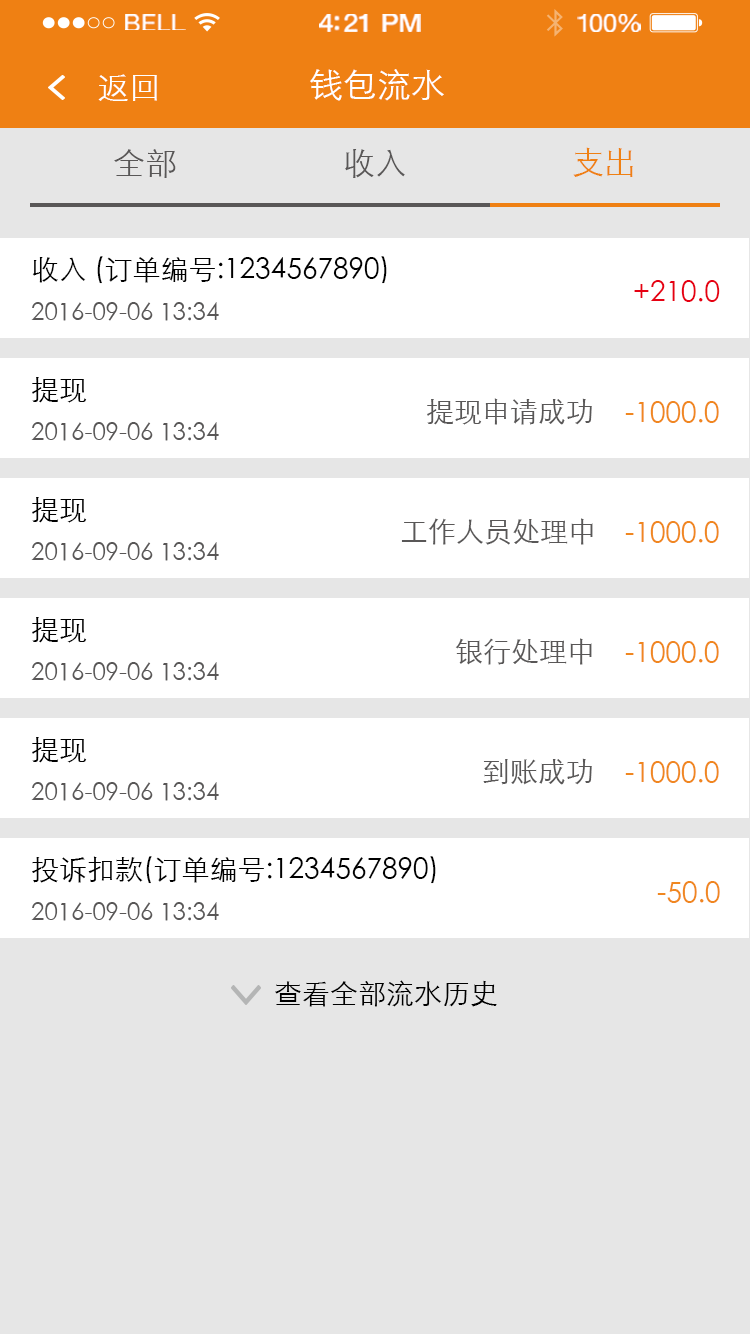
<style>
.page{position:relative;width:750px;height:1334px;background:#e6e6e6}
.page>*{position:absolute;margin:0}
.t1{font:23.3px "HelveticaNeue";letter-spacing:0.02em;color:#ffffff;scale:1.06 1}
.t2{font:25.3px "HelveticaNeue-Medium";letter-spacing:-0.02em;color:#ffffff;scale:1.06 1}
.t3{font:24.3px "HelveticaNeue";letter-spacing:-0.02em;color:#ffffff;scale:1.06 1}
.t4{font:32px "STXihei";color:#ffffff}
.t5{font:34px "STXihei";color:#ffffff}
.t6{font:32px "STXihei";color:#595757}
.t7{font:32px "STXihei";color:#ef8013}
.t8{font:28px/46px "STXihei";color:#000000}
.t9{font:24px/46px "STXihei";color:#595757}
.t10{font:28px "STXihei";color:#e60012}
.t11{font:28px "STXihei";color:#595757}
.t12{font:28px "STXihei";color:#f08720}
.t13{font:28px "STXihei";color:#000000}
</style>
<div class="page">
<p class="t1" style="left:125px;top:14px;width:61px;height:16px">BELL</p>
<p class="t2" style="left:319px;top:14px;width:102px;height:18px">4:21 PM</p>
<p class="t3" style="left:577px;top:14px;width:64px;height:18px">100%</p>
<p class="t4" style="left:98px;top:74px;width:59px;height:27px">返回</p>
<p class="t5" style="left:310px;top:69px;width:134px;height:32px">钱包流水</p>
<p class="t6" style="left:114px;top:149px;width:62px;height:29px">全部</p>
<p class="t6" style="left:345px;top:149px;width:60px;height:29px">收入</p>
<p class="t7" style="left:573px;top:147px;width:60px;height:30px">支出</p>
<p class="t8" style="left:31px;top:256px;width:356px;height:65px">收入 (订单编号:1234567890)<br><span class="t9">2016-09-06 13:34</span></p>
<p class="t10" style="left:634px;top:280px;width:86px;height:22px">+210.0</p>
<p class="t9" style="left:31px;top:377px;width:188px;height:64px"><span class="t8">提现<br></span>2016-09-06 13:34</p>
<p class="t11" style="left:427px;top:398px;width:165px;height:27px">提现申请成功</p>
<p class="t12" style="left:625px;top:401px;width:94px;height:22px">-1000.0</p>
<p class="t9" style="left:31px;top:497px;width:188px;height:64px"><span class="t8">提现<br></span>2016-09-06 13:34</p>
<p class="t11" style="left:401px;top:518px;width:192px;height:27px">工作人员处理中</p>
<p class="t12" style="left:625px;top:521px;width:94px;height:22px">-1000.0</p>
<p class="t9" style="left:31px;top:617px;width:188px;height:64px"><span class="t8">提现<br></span>2016-09-06 13:34</p>
<p class="t11" style="left:455px;top:638px;width:137px;height:27px">银行处理中</p>
<p class="t12" style="left:625px;top:641px;width:94px;height:22px">-1000.0</p>
<p class="t9" style="left:31px;top:737px;width:188px;height:64px"><span class="t8">提现<br></span>2016-09-06 13:34</p>
<p class="t11" style="left:483px;top:758px;width:109px;height:27px">到账成功</p>
<p class="t12" style="left:625px;top:761px;width:94px;height:22px">-1000.0</p>
<p class="t8" style="left:31px;top:856px;width:405px;height:65px">投诉扣款(订单编号:1234567890)<br><span class="t9">2016-09-06 13:34</span></p>
<p class="t12" style="left:657px;top:881px;width:63px;height:22px">-50.0</p>
<p class="t13" style="left:275px;top:980px;width:222px;height:27px">查看全部流水历史</p>
</div>
